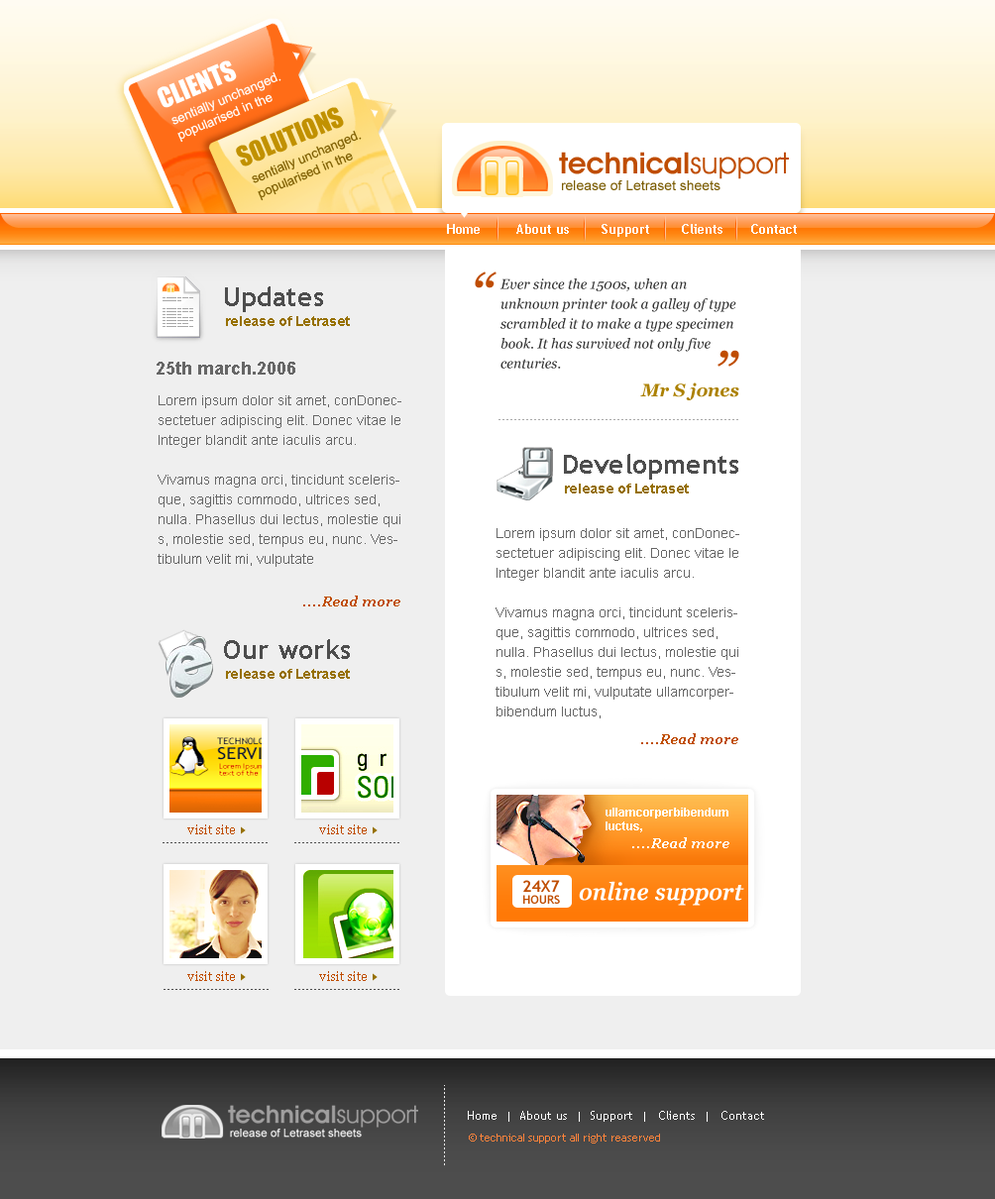
<style>
.page{position:relative;width:995px;height:1199px;background:#efefef}
.page>*{position:absolute;margin:0}
.t1{font:25.8px "Impact";color:#ffffff;text-transform:uppercase}
.t2{font:12.9px/15.9px "ArialMT";color:#ffffff}
.t3{font:25.8px "Impact";color:#c19100;text-transform:uppercase}
.t4{font:12.9px/15.9px "ArialMT";color:#7d5e00}
.t5{font:29.7px "AvantGardeITCbyBT-Demi";color:#bf4d02}
.t6{font:29.7px "AvantGardeITCbyBT-Book";color:#bf4d02}
.t7{font:13.9px "ArialMT";color:#7b5c02}
.t8{font:12.9px "TrebuchetMS-Bold";color:#ffffff}
.t9{font:59.4px "Georgia-Italic";color:#bf4d02}
.t10{font:13.9px/19.8px "Georgia-Italic";color:#323232}
.t11{font:26.7px "TrebuchetMS-Bold";color:#4d4d4d}
.t12{font:13.9px "Arial-BoldMT";letter-spacing:-0.025em;color:#967001}
.t13{font:17.8px "Arial-BoldMT";color:#666666}
.t14{font:17.8px "Georgia-BoldItalic";color:#ac8101}
.t15{font:13.9px/19.8px "ArialMT";color:#666666}
.t16{font:13.9px "Georgia-BoldItalic";color:#bf4d02}
.t17{font:11.9px/13.9px "Arial-BoldMT";color:#ffffff}
.t18{font:11.9px "Georgia";color:#bf4d02}
.t19{font:13.9px "Georgia-BoldItalic";color:#ffffff}
.t20{font:11.9px/11.9px "TrebuchetMS-Bold";color:#bf4d02;text-transform:uppercase}
.t21{font:15.9px/11.9px "TrebuchetMS-Bold";color:#bf4d02;text-transform:uppercase}
.t22{font:23.8px "Georgia-Italic";color:#ffffff;font-weight:bold}
.t23{font:11.9px "TrebuchetMS";color:#ffffff}
.t24{font:10.9px "TrebuchetMS";color:#ff833b}
</style>
<div class="page">
<p class="t1" style="left:157px;top:60px;width:80px;height:48px;rotate:-23deg">clients</p>
<p class="t2" style="left:171px;top:71px;width:110px;height:72px;rotate:-23deg">sentially unchanged.<br>popularised in the</p>
<p class="t3" style="left:236px;top:107px;width:108px;height:59px;rotate:-23deg">solutions</p>
<p class="t4" style="left:252px;top:130px;width:110px;height:71px;rotate:-23deg">sentially unchanged.<br>popularised in the</p>
<p class="t5" style="left:559px;top:152px;width:230px;height:27px">technical<span class="t6">support</span></p>
<p class="t7" style="left:562px;top:180px;width:158px;height:10px">release of Letraset sheets</p>
<p class="t8" style="left:447px;top:224px;width:350px;height:13px">Home         About us        Support        Clients       Contact</p>
<p class="t9" style="left:475px;top:271px;width:21px;height:17px">“</p>
<p class="t10" style="left:499px;top:278px;width:237px;height:91px">Ever since the 1500s, when an unknown printer took a galley of type  scrambled it to make a type specimen book. It has survived not only five centuries.</p>
<p class="t11" style="left:225px;top:286px;width:98px;height:26px">Updates</p>
<p class="t12" style="left:226px;top:316px;width:124px;height:10px">release of Letraset</p>
<p class="t9" style="left:717px;top:350px;width:22px;height:17px;rotate:180deg">“</p>
<p class="t13" style="left:157px;top:362px;width:138px;height:12px">25th march.2006</p>
<p class="t14" style="left:640px;top:382px;width:99px;height:18px">Mr S jones</p>
<p class="t15" style="left:158px;top:395px;width:243px;height:172px">Lorem ipsum dolor sit amet, conDonecsectetuer adipiscing elit. Donec vitae le Integer blandit ante iaculis arcu. <br><br>Vivamus magna orci, tincidunt scelerisque, sagittis commodo, ultrices sed, nulla. Phasellus dui lectus, molestie qui<br>s, molestie sed, tempus eu, nunc. Vestibulum velit mi, vulputate</p>
<p class="t11" style="left:564px;top:454px;width:174px;height:26px">Developments</p>
<p class="t12" style="left:565px;top:483px;width:124px;height:10px">release of Letraset</p>
<p class="t15" style="left:495px;top:528px;width:244px;height:190px">Lorem ipsum dolor sit amet, conDonecsectetuer adipiscing elit. Donec vitae le Integer blandit ante iaculis arcu. <br><br>Vivamus magna orci, tincidunt scelerisque, sagittis commodo, ultrices sed, nulla. Phasellus dui lectus, molestie qui<br>s, molestie sed, tempus eu, nunc. Vestibulum velit mi, vulputate ullamcorperbibendum luctus,</p>
<p class="t16" style="left:303px;top:595px;width:97px;height:11px">....Read more</p>
<p class="t11" style="left:224px;top:639px;width:126px;height:20px">Our works</p>
<p class="t12" style="left:226px;top:669px;width:124px;height:10px">release of Letraset</p>
<p class="t16" style="left:641px;top:733px;width:97px;height:11px">....Read more</p>
<p class="t17" style="left:605px;top:807px;width:123px;height:25px">ullamcorperbibendum <br>luctus,</p>
<p class="t18" style="left:187px;top:824px;width:48px;height:10px">visit site</p>
<p class="t18" style="left:319px;top:824px;width:48px;height:10px">visit site</p>
<p class="t19" style="left:632px;top:837px;width:97px;height:11px">....Read more</p>
<p class="t20" style="left:523px;top:880px;width:37px;height:24px"><span class="t21">24x7<br></span>hours</p>
<p class="t22" style="left:579px;top:881px;width:165px;height:25px">online support</p>
<p class="t18" style="left:187px;top:971px;width:48px;height:10px">visit site</p>
<p class="t18" style="left:319px;top:971px;width:48px;height:10px">visit site</p>
<p class="t23" style="left:468px;top:1111px;width:296px;height:11px">Home  |  About us  |  Support  |   Clients  |   Contact</p>
<p class="t24" style="left:469px;top:1133px;width:191px;height:10px">© technical support all right reaserved</p>
</div>
